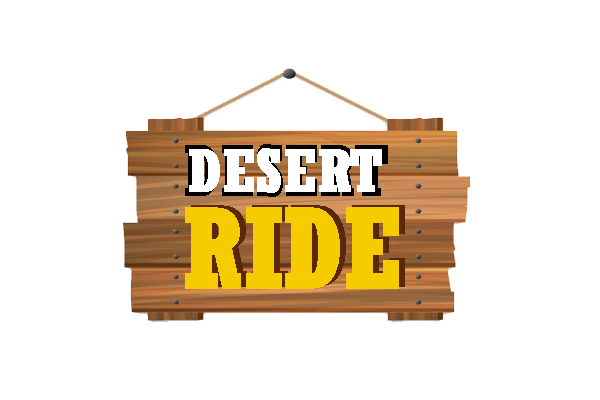
<style>
.page{position:relative;width:600px;height:400px;background:#ffffff}
.page>*{position:absolute;margin:0}
.t1{font:60px "Rockwell-CondensedBold";color:#ffffff;font-weight:bold}
.t2{font:111.4px "Rockwell-CondensedBold";color:#f6cb00;font-weight:bold;scale:0.95 1}
</style>
<div class="page">
<p class="t1" style="left:189px;top:148px;width:193px;height:45px">DESERT</p>
<p class="t2" style="left:185px;top:207px;width:214px;height:82px">RIDE</p>
<p class="t2" style="left:191px;top:205px;width:214px;height:82px">RIDE</p>
</div>
